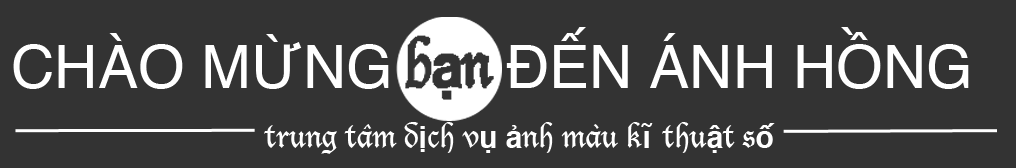
<style>
.page{position:relative;width:1016px;height:168px;background:#333333}
.page>*{position:absolute;margin:0}
.t1{font:60px "Helvetica";color:#ffffff}
.t2{font:30px "LucidaBlackletter";color:#ffffff}
.t3{font:30px "Helvetica-Bold";color:#ffffff}
</style>
<div class="page">
<p class="t1" style="left:13px;top:27px;width:956px;height:62px">CHÀO MỪNG       ĐẾN ÁNH HỒNG</p>
<p class="t2" style="left:264px;top:122px;width:511px;height:32px">trung tâm d<span class="t3">ị</span>ch v<span class="t3">ụ ả</span>nh màu k<span class="t3">ĩ</span> thu<span class="t3">ậ</span>t s<span class="t3">ố</span></p>
</div>
